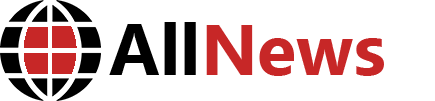
<style>
.page{position:relative;width:435px;height:101px;background:#ffffff}
.page>*{position:absolute;margin:0}
.t1{font:72px "Ebrima-Bold";color:#c72727}
.t2{font:72px "Ebrima-Bold";color:#000000}
</style>
<div class="page">
<p class="t1" style="left:109px;top:22px;width:275px;height:54px"><span class="t2">All</span>News</p>
</div>
